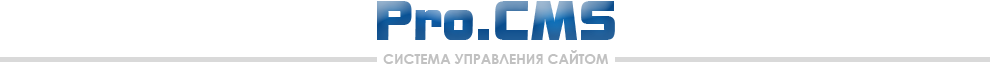
<style>
.page{position:relative;width:990px;height:70px;background:#ffffff}
.page>*{position:absolute;margin:0}
.t1{font:14px "CenturyGothic-Bold";color:#c1c1c1}
</style>
<div class="page">
<p class="t1" style="left:383px;top:50px;width:225px;height:14px">СИСТЕМА УПРАВЛЕНИЯ САЙТОМ</p>
</div>
